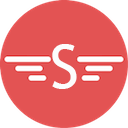
<style>
.page{position:relative;width:128px;height:128px;background:#e35353}
.page>*{position:absolute;margin:0}
.t1{font:60px "TrebuchetMS";letter-spacing:0.08em;color:#fcfcfc;text-transform:uppercase}
</style>
<div class="page">
<p class="t1" style="left:52px;top:44px;width:25px;height:45px">S</p>
</div>
